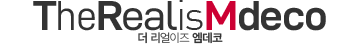
<style>
.page{position:relative;width:360px;height:44px;background:#ffffff}
.page>*{position:absolute;margin:0}
.t1{font:42px "D-DINExp-Bold";letter-spacing:-0.025em;color:#333333}
.t2{font:42px "D-DIN";letter-spacing:-0.025em;color:#333333}
.t3{font:42px "D-DINExp";letter-spacing:-0.025em;color:#333333}
.t4{font:42px "Dinlig";letter-spacing:-0.025em;color:#333333}
.t5{font:42px "D-DINExp-Bold";letter-spacing:-0.025em;color:#cc0033}
.t6{font:12px "PretendardVariable-SemiBold";letter-spacing:-0.01em;color:#333333}
.t7{font:12px "PretendardVariable-Medium";letter-spacing:-0.01em;color:#333333}
.t8{font:12px "PretendardVariable-Regular";letter-spacing:-0.01em;color:#333333}
.t9{font:12px "PretendardVariable-Light";letter-spacing:-0.01em;color:#333333}
.t10{font:12px "PretendardVariable-ExtraLight";letter-spacing:-0.01em;color:#333333}
</style>
<div class="page">
<p class="t1" style="left:33px;top:0px;width:293px;height:31px">T<span class="t2">he</span>R<span class="t3">eal</span><span class="t4">is</span><span class="t5">M</span>deco</p>
<p class="t6" style="left:138px;top:32px;width:85px;height:12px"><span class="t7">더 </span><span class="t8">리</span><span class="t9">얼</span><span class="t10">이즈 </span>엠데코</p>
</div>
